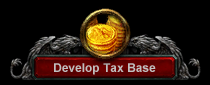
<style>
.page{position:relative;width:210px;height:85px;background:#000000}
.page>*{position:absolute;margin:0}
.t1{font:12px "Arial-BoldMT";color:#bfbfbf}
</style>
<div class="page">
<p class="t1" style="left:54px;top:63px;width:102px;height:12px">Develop Tax Base</p>
</div>
